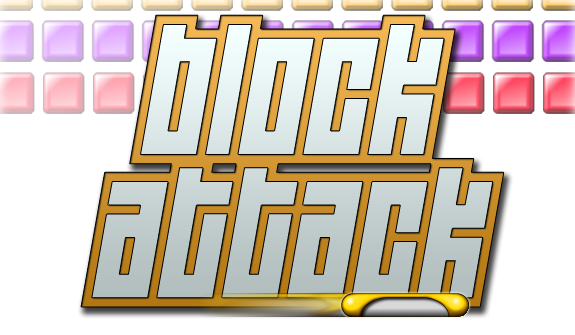
<style>
.page{position:relative;width:575px;height:335px;background:#ffffff}
.page>*{position:absolute;margin:0}
.t1{font:154.6px/143.2px "Wideawake"}
.t2{font:154.6px/143.2px "WideawakeBlack"}
</style>
<div class="page">
<p class="t1" style="left:81px;top:15px;width:423px;height:292px;text-align:center">Block<br>Attack</p>
<p class="t2" style="left:91px;top:24px;width:402px;height:274px;text-align:center">Block<br>Attack</p>
</div>
